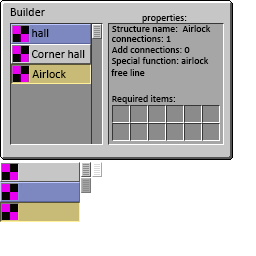
<style>
.page{position:relative;width:256px;height:256px;background:#ffffff}
.page>*{position:absolute;margin:0}
.t1{font:12px "Calibri";color:#000000}
.t2{font:10px "Calibri";color:#000000}
</style>
<div class="page">
<p class="t1" style="left:10px;top:8px;width:35px;height:8px">Builder</p>
<p class="t2" style="left:142px;top:14px;width:45px;height:9px">properties:</p>
<p class="t1" style="left:32px;top:29px;width:17px;height:8px">hall</p>
<p class="t2" style="left:112px;top:25px;width:99px;height:7px">Structure name:  Airlock</p>
<p class="t2" style="left:112px;top:35px;width:59px;height:7px">connections: 1</p>
<p class="t1" style="left:32px;top:50px;width:53px;height:8px">Corner hall</p>
<p class="t2" style="left:111px;top:46px;width:79px;height:7px">Add connections: 0</p>
<p class="t2" style="left:111px;top:57px;width:98px;height:9px">Special function: airlock</p>
<p class="t1" style="left:32px;top:70px;width:34px;height:8px">Airlock</p>
<p class="t2" style="left:111px;top:69px;width:34px;height:7px">free line</p>
<p class="t2" style="left:112px;top:95px;width:63px;height:9px">Required items:</p>
</div>
